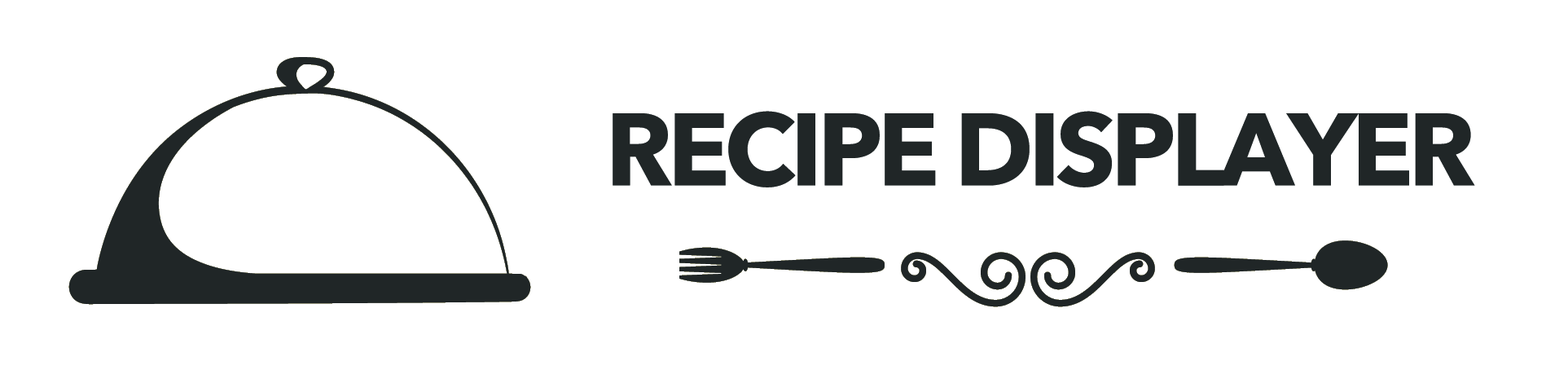
<style>
.page{position:relative;width:1568px;height:370px;background:#ffffff}
.page>*{position:absolute;margin:0}
.t1{font:101.8px "AvenirNextLTPro-Bold";letter-spacing:-0.05em;color:#202627;text-transform:uppercase}
</style>
<div class="page">
<p class="t1" style="left:613px;top:111px;width:862px;height:76px">recıpe dısplayer</p>
</div>
